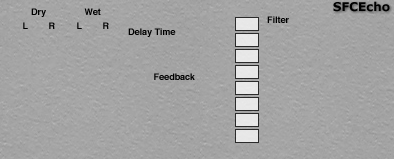
<style>
.page{position:relative;width:394px;height:159px}
.page>*{position:absolute;margin:0}
.t1{font:12px "Verdana-Bold";color:#000000}
.t2{font:9px "Helvetica-Bold";color:#000000}
</style>
<div class="page">
<p class="t1" style="left:333px;top:1px;width:57px;height:11px">SFCEcho</p>
<p class="t2" style="left:31px;top:8px;width:15px;height:9px">Dry</p>
<p class="t2" style="left:84px;top:8px;width:17px;height:7px">Wet</p>
<p class="t2" style="left:267px;top:16px;width:22px;height:7px">Filter</p>
<p class="t2" style="left:23px;top:22px;width:5px;height:7px">L</p>
<p class="t2" style="left:49px;top:22px;width:6px;height:7px">R</p>
<p class="t2" style="left:77px;top:22px;width:5px;height:7px">L</p>
<p class="t2" style="left:103px;top:22px;width:6px;height:7px">R</p>
<p class="t2" style="left:128px;top:28px;width:48px;height:9px">Delay Time</p>
<p class="t2" style="left:154px;top:73px;width:41px;height:7px">Feedback</p>
</div>
